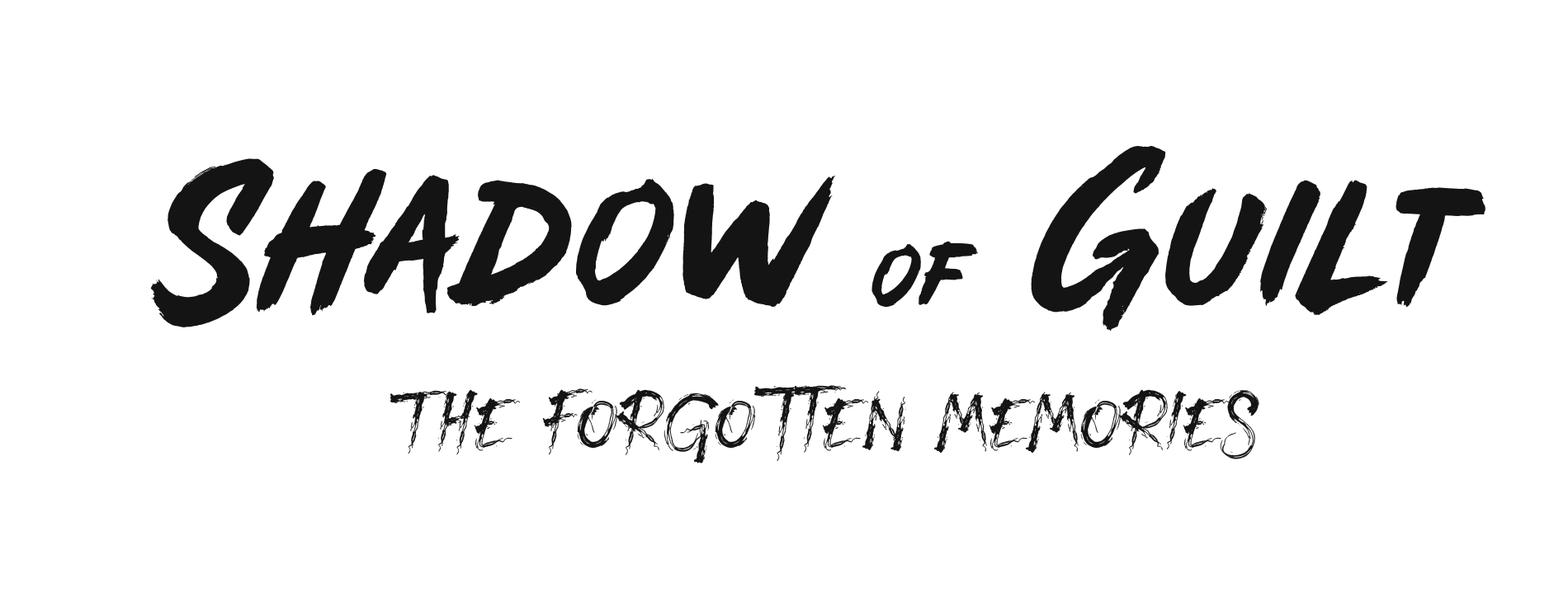
<style>
.page{position:relative;width:1568px;height:602px;background:#ffffff}
.page>*{position:absolute;margin:0}
.t1{font:206.3px "MADESoulmazeBrush";color:#141414}
.t2{font:103.2px "MADESoulmazeBrush";color:#141414}
.t3{font:82.5px "BloodScratchPersonalUse";color:#141414}
</style>
<div class="page">
<p class="t1" style="left:150px;top:145px;width:1335px;height:187px">Shadow <span class="t2">of</span>  Guilt</p>
<p class="t3" style="left:390px;top:385px;width:869px;height:79px">The forgotten memories</p>
</div>
